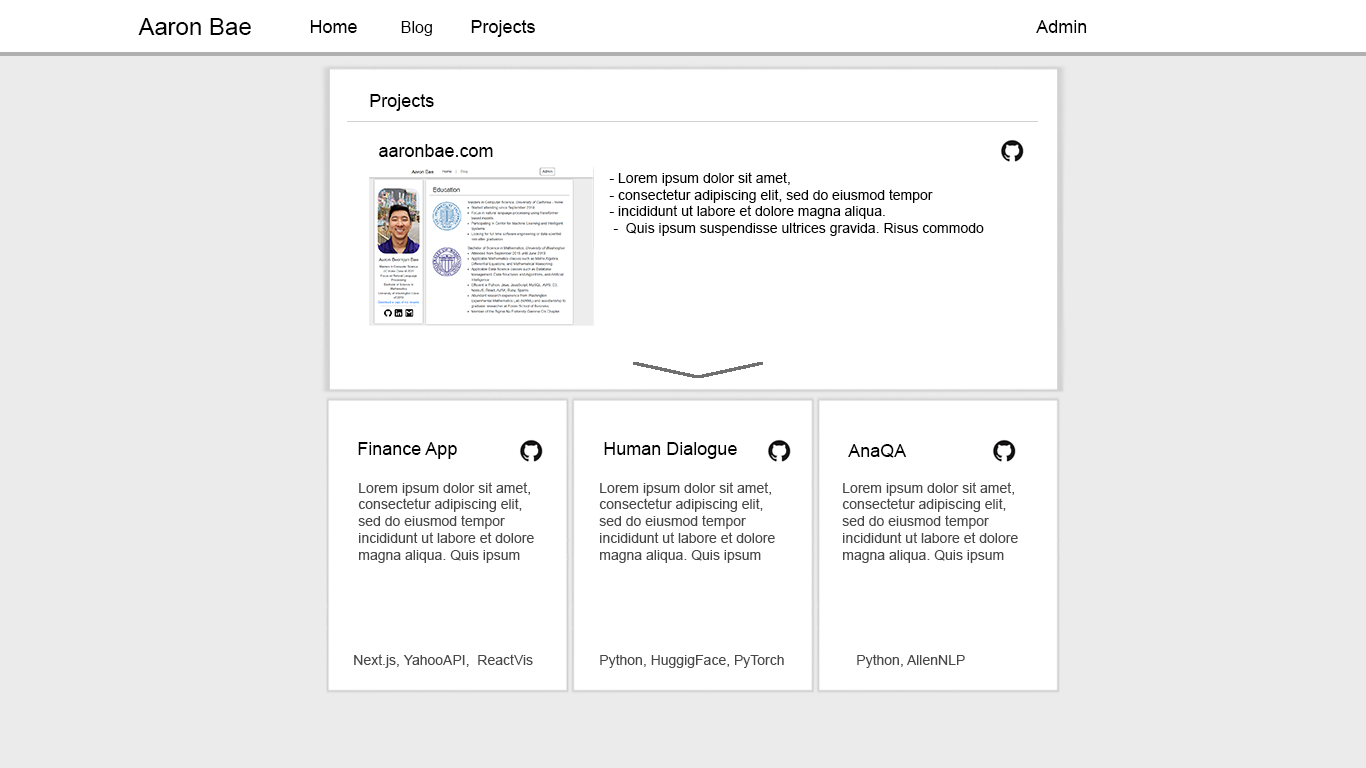
<style>
.page{position:relative;width:1366px;height:768px;background:#ebebeb}
.page>*{position:absolute;margin:0}
.t1{font:24px "ArialMT";color:#000000}
.t2{font:18px "ArialMT";color:#000000}
.t3{font:16px "ArialMT";color:#000000}
.t4{font:14px "ArialMT";color:#000000}
.t5{font:14px "ArialMT";color:#484848}
</style>
<div class="page">
<p class="t1" style="left:138px;top:18px;width:113px;height:17px">Aaron Bae</p>
<p class="t2" style="left:310px;top:20px;width:47px;height:13px">Home</p>
<p class="t3" style="left:401px;top:21px;width:31px;height:15px">Blog</p>
<p class="t2" style="left:471px;top:20px;width:64px;height:17px">Projects</p>
<p class="t2" style="left:1036px;top:20px;width:51px;height:13px">Admin</p>
<p class="t2" style="left:370px;top:94px;width:64px;height:17px">Projects</p>
<p class="t2" style="left:379px;top:144px;width:114px;height:13px">aaronbae.com</p>
<p class="t4" style="left:609px;top:172px;width:375px;height:64px">- Lorem ipsum dolor sit amet, <br>- consectetur adipiscing elit, sed do eiusmod tempor <br>- incididunt ut labore et dolore magna aliqua.<br> -  Quis ipsum suspendisse ultrices gravida. Risus commodo</p>
<p class="t2" style="left:358px;top:442px;width:99px;height:17px">Finance App</p>
<p class="t2" style="left:604px;top:442px;width:133px;height:17px">Human Dialogue</p>
<p class="t2" style="left:848px;top:444px;width:59px;height:14px">AnaQA</p>
<p class="t5" style="left:358px;top:482px;width:176px;height:81px">Lorem ipsum dolor sit amet, consectetur adipiscing elit, sed do eiusmod tempor incididunt ut labore et dolore magna aliqua. Quis ipsum suspendisse ultrices gravida. Risus commodo viverra maecenas accumsan lacus vel facilisis.</p>
<p class="t5" style="left:599px;top:482px;width:176px;height:81px">Lorem ipsum dolor sit amet, consectetur adipiscing elit, sed do eiusmod tempor incididunt ut labore et dolore magna aliqua. Quis ipsum suspendisse ultrices gravida. Risus commodo viverra maecenas accumsan lacus vel facilisis.</p>
<p class="t5" style="left:842px;top:482px;width:176px;height:81px">Lorem ipsum dolor sit amet, consectetur adipiscing elit, sed do eiusmod tempor incididunt ut labore et dolore magna aliqua. Quis ipsum suspendisse ultrices gravida. Risus commodo viverra maecenas accumsan lacus vel facilisis.</p>
<p class="t5" style="left:354px;top:654px;width:179px;height:14px">Next.js, YahooAPI,  ReactVis</p>
<p class="t5" style="left:600px;top:654px;width:184px;height:14px">Python, HuggigFace, PyTorch</p>
<p class="t5" style="left:857px;top:654px;width:108px;height:14px">Python, AllenNLP</p>
</div>
